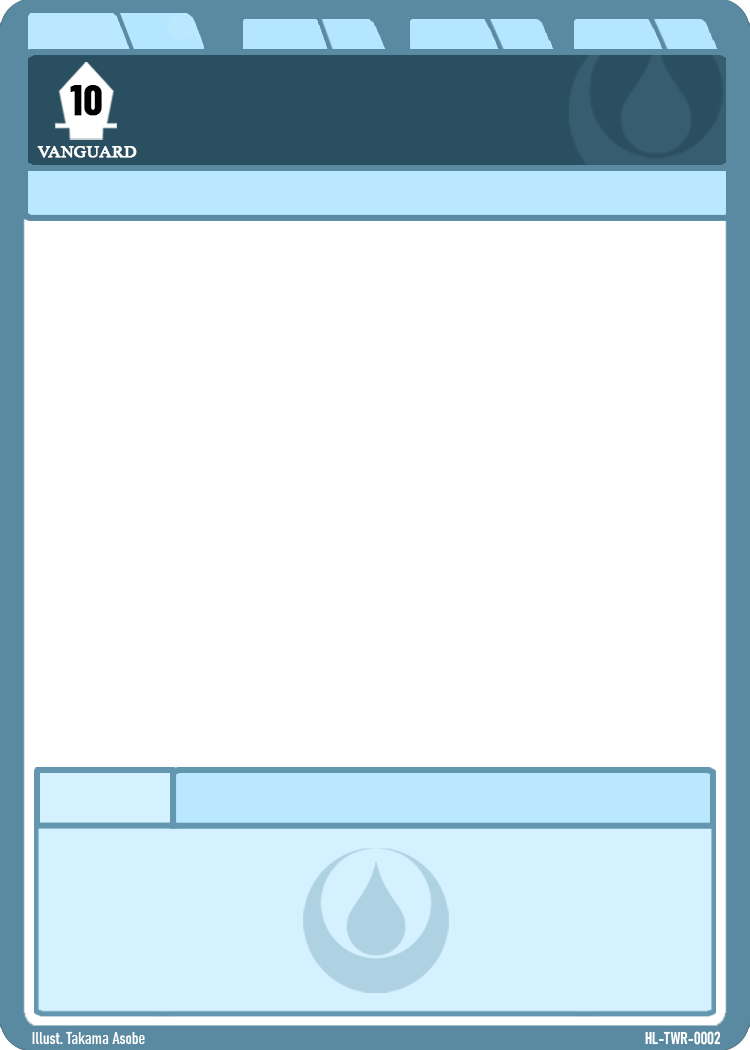
<style>
.page{position:relative;width:750px;height:1050px;background:#ffffff}
.page>*{position:absolute;margin:0}
.t1{font:41.7px "BarlowCondensed-Bold";color:#000000;font-weight:bold}
.t2{font:25px "Microsoft-Himalaya";color:#ffffff;text-transform:uppercase;font-weight:bold}
.t3{font:16.7px "Bahnschrift-Condensed";color:#ffffff}
.t4{font:16.7px "Bahnschrift-SemiBoldCondensed";color:#ffffff}
</style>
<div class="page">
<p class="t1" style="left:70px;top:85px;width:32px;height:31px">10</p>
<p class="t2" style="left:37px;top:146px;width:100px;height:12px">vanguard</p>
<p class="t3" style="left:32px;top:1031px;width:113px;height:14px">Illust. Takama Asobe</p>
<p class="t4" style="left:645px;top:1031px;width:76px;height:14px">HL-TWR-0002</p>
</div>
